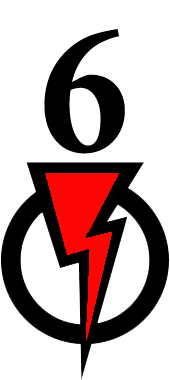
<style>
.page{position:relative;width:170px;height:380px;background:#ffffff}
.page>*{position:absolute;margin:0}
.t1{font:190px "MinionPro-BoldCn";color:#000000}
</style>
<div class="page">
<p class="t1" style="left:44px;top:29px;width:81px;height:125px">6</p>
</div>
